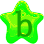
<style>
.page{position:relative;width:44px;height:44px;background:#ffffff}
.page>*{position:absolute;margin:0}
.t1{font:36.4px "SimSun";color:#14a601;font-weight:bold}
</style>
<div class="page">
<p class="t1" style="left:15px;top:10px;width:17px;height:27px">b</p>
</div>
